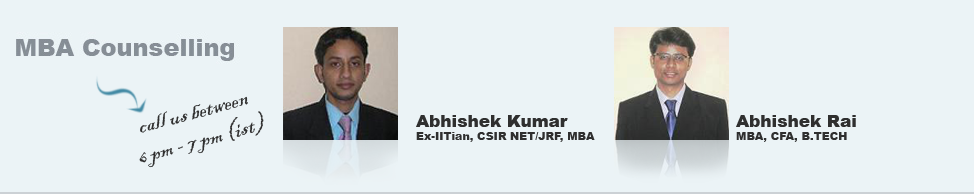
<style>
.page{position:relative;width:974px;height:194px;background:#ebf3f6}
.page>*{position:absolute;margin:0}
.t1{font:24px "BlackadderITC-Regular";color:#2f2f2f}
.t2{font:11px "Arial-Black";color:#2f2f2f}
.t3{font:16.8px "Arial-Black";color:#2f2f2f}
</style>
<div class="page">
<p class="t1" style="left:139px;top:96px;width:125px;height:72px;text-align:center;rotate:-15deg">call us between<br>6 pm - 7 pm (ist)</p>
<p class="t2" style="left:416px;top:115px;width:179px;height:27px"><span class="t3">Abhishek Kumar</span><br>Ex-IITian, CSIR NET/JRF, MBA</p>
<p class="t2" style="left:736px;top:115px;width:120px;height:27px"><span class="t3">Abhishek Rai<br></span>MBA, CFA, B.TECH</p>
</div>
